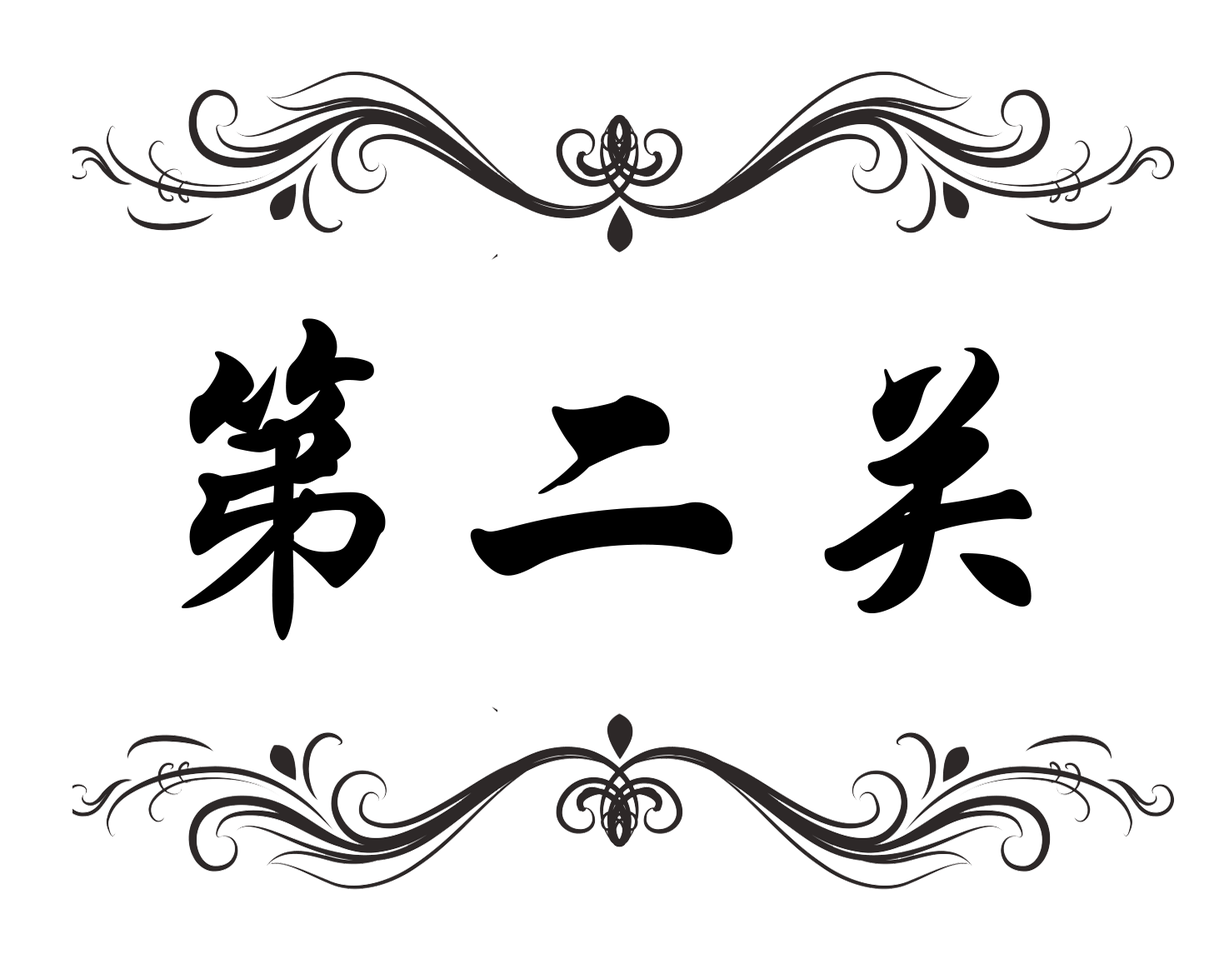
<style>
.page{position:relative;width:1224px;height:974px;background:#ffffff}
.page>*{position:absolute;margin:0}
.t1{font:333.3px "STXingkai";color:#000000}
</style>
<div class="page">
<p class="t1" style="left:182px;top:318px;width:850px;height:323px">第二关</p>
</div>
